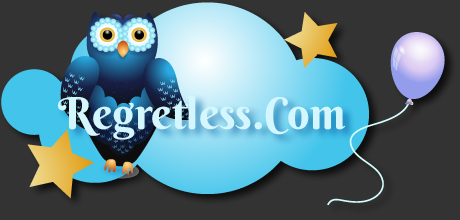
<style>
.page{position:relative;width:460px;height:220px;background:#333333}
.page>*{position:absolute;margin:0}
.t1{font:44px "BerkshireSwash-Regular";color:#d4f7ff}
</style>
<div class="page">
<p class="t1" style="left:58px;top:95px;width:288px;height:45px">Regretless.Com</p>
</div>
